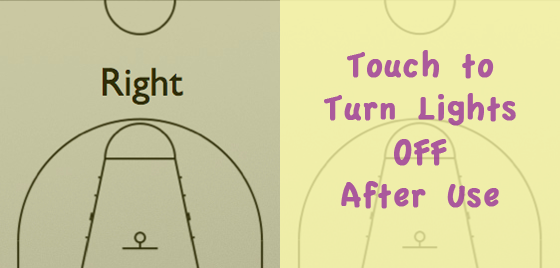
<style>
.page{position:relative;width:560px;height:268px}
.page>*{position:absolute;margin:0}
.t1{font:36px "AppleCasual";color:#aa599c;font-weight:bold}
</style>
<div class="page">
<p class="t1" style="left:324px;top:50px;width:192px;height:159px;text-align:center">Touch to Turn Lights OFF<br>After Use</p>
</div>
